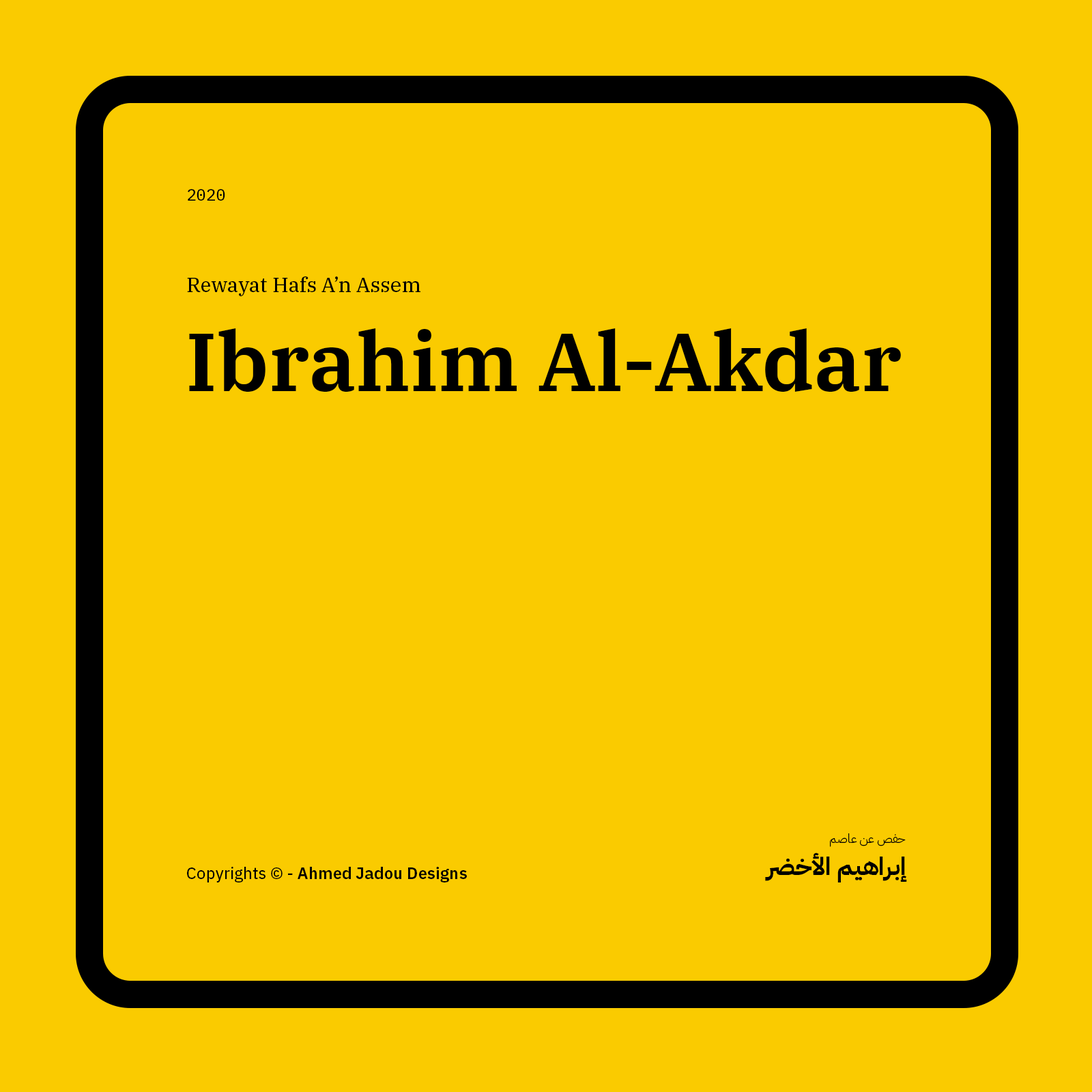
<style>
.page{position:relative;width:1092px;height:1092px;background:#facb00}
.page>*{position:absolute;margin:0}
.t1{font:16.4px "IBMPlexMono-Text";color:#000000}
.t2{font:20.5px "IBMPlexSerif-Text";color:#000000}
.t3{font:81.9px "IBMPlexSerif-SemiBold";color:#000000}
.t4{font:12.3px "IBMPlexArabic-Light";color:#000000}
.t5{font:24.6px "IBMPlexArabic-Bold";color:#000000}
.t6{font:16.4px "IBMPlexSans-SemiBold";color:#000000}
.t7{font:16.4px "IBMPlexSans-Text";color:#000000}
</style>
<div class="page">
<p class="t1" style="left:188px;top:189px;width:37px;height:12px">2020</p>
<p class="t2" style="left:187px;top:276px;width:233px;height:20px">Rewayat Hafs A’n Assem</p>
<p class="t3" style="left:189px;top:328px;width:712px;height:64px">Ibrahim Al-Akdar</p>
<p class="t4" style="left:830px;top:833px;width:76px;height:14px">حفص عن عاصم</p>
<p class="t5" style="left:765px;top:852px;width:142px;height:30px">إبراهيم الأخضر</p>
<p class="t6" style="left:187px;top:867px;width:280px;height:15px"><span class="t7">Copyrights © - </span>Ahmed Jadou Designs</p>
</div>
